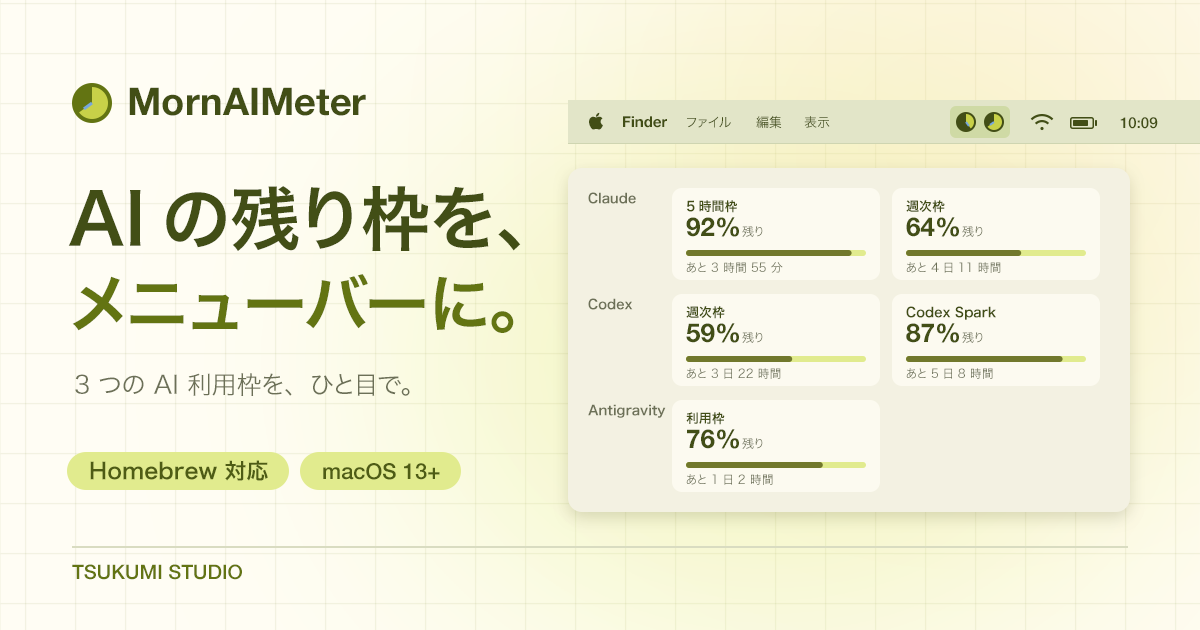
<style>
.page{position:relative;width:1200px;height:630px}
.page>*{position:absolute;margin:0}
.t1{font:38px "HelveticaNeue-Bold";color:#424e16}
.t2{font:15px "HelveticaNeue-Bold";color:#424e16}
.t3{font:13px "HiraginoSans-W3";color:#424e16}
.t4{font:13px "HiraginoSans-W3"}
.t5{font:15px "HelveticaNeue-Medium";color:#424e16}
.t6{font:70px "HiraginoSans-W6";color:#424e16}
.t7{font:13px "HiraginoSans-W6";color:#6c7057}
.t8{font:13px "HiraginoSans-W6";color:#424e16}
.t9{font:26px "HelveticaNeue-Bold";color:#424e16}
.t10{font:12px "HiraginoSans-W3";color:#6c7057}
.t11{font:64px "HiraginoSans-W6";color:#637412}
.t12{font:25px "HiraginoSans-W3";color:#6c7057}
.t13{font:12px "HiraginoSans-W3"}
.t14{font:22px "HiraginoSans-W6";color:#4e5c14}
.t15{font:22px "HelveticaNeue-Medium";color:#4e5c14}
.t16{font:20px "HelveticaNeue-Medium";color:#637412}
</style>
<div class="page">
<p class="t1" style="left:129px;top:87px;width:237px;height:29px">MornAIMeter</p>
<p class="t2" style="left:623px;top:116px;width:44px;height:12px">Finder</p>
<p class="t3" style="left:687px;top:116px;width:44px;height:12px">ファイル</p>
<p class="t3" style="left:756px;top:115px;width:26px;height:14px">編集</p>
<p class="t4" style="left:804px;top:116px;width:26px;height:12px">表示</p>
<p class="t5" style="left:1120px;top:117px;width:38px;height:12px">10:09</p>
<p class="t6" style="left:68px;top:186px;width:453px;height:65px">AIの残り枠を、</p>
<p class="t7" style="left:588px;top:192px;width:48px;height:12px">Claude</p>
<p class="t8" style="left:686px;top:200px;width:51px;height:13px">5時間枠</p>
<p class="t8" style="left:906px;top:200px;width:39px;height:13px">週次枠</p>
<p class="t9" style="left:686px;top:217px;width:53px;height:20px">92%</p>
<p class="t9" style="left:906px;top:217px;width:53px;height:20px">64%</p>
<p class="t10" style="left:742px;top:226px;width:21px;height:11px">残り</p>
<p class="t10" style="left:962px;top:226px;width:21px;height:11px">残り</p>
<p class="t10" style="left:686px;top:262px;width:97px;height:11px">あと 3 時間 55 分</p>
<p class="t10" style="left:906px;top:262px;width:95px;height:11px">あと 4 日 11 時間</p>
<p class="t11" style="left:72px;top:274px;width:442px;height:59px">メニューバーに。</p>
<p class="t7" style="left:588px;top:298px;width:45px;height:12px">Codex</p>
<p class="t8" style="left:686px;top:306px;width:39px;height:13px">週次枠</p>
<p class="t8" style="left:906px;top:306px;width:90px;height:14px">Codex Spark</p>
<p class="t9" style="left:686px;top:323px;width:53px;height:20px">59%</p>
<p class="t9" style="left:906px;top:323px;width:53px;height:20px">87%</p>
<p class="t10" style="left:742px;top:332px;width:21px;height:11px">残り</p>
<p class="t10" style="left:962px;top:332px;width:21px;height:11px">残り</p>
<p class="t12" style="left:75px;top:373px;width:335px;height:23px">3 つの AI 利用枠を、ひと目で。</p>
<p class="t13" style="left:686px;top:368px;width:95px;height:11px">あと 3 日 22 時間</p>
<p class="t10" style="left:906px;top:368px;width:87px;height:11px">あと 5 日 8 時間</p>
<p class="t7" style="left:588px;top:404px;width:78px;height:14px">Antigravity</p>
<p class="t8" style="left:686px;top:412px;width:39px;height:13px">利用枠</p>
<p class="t9" style="left:687px;top:429px;width:52px;height:20px">76%</p>
<p class="t10" style="left:742px;top:438px;width:21px;height:11px">残り</p>
<p class="t14" style="left:90px;top:460px;width:178px;height:21px">Homebrew 対応</p>
<p class="t15" style="left:323px;top:463px;width:117px;height:17px">macOS 13+</p>
<p class="t13" style="left:686px;top:474px;width:87px;height:11px">あと 1 日 2 時間</p>
<p class="t16" style="left:72px;top:564px;width:170px;height:16px">TSUKUMI STUDIO</p>
</div>
